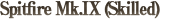
<style>
.page{position:relative;width:178px;height:19px;background:#ffffff}
.page>*{position:absolute;margin:0}
.t1{font:18px "RyuminPro-ExBold";letter-spacing:-0.08em;color:#4a3f32;font-weight:bold;scale:0.9 1}
</style>
<div class="page">
<p class="t1" style="left:0px;top:1px;width:160px;height:18px">Spitfire Mk.IX (Skilled)</p>
</div>
